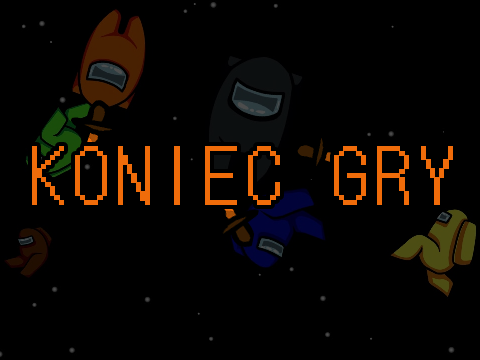
<style>
.page{position:relative;width:480px;height:360px;background:#000000}
.page>*{position:absolute;margin:0}
.t1{font:72px "DotGothic16-Regular";letter-spacing:0.1em;color:#f06c0a;text-transform:uppercase}
</style>
<div class="page">
<p class="t1" style="left:32px;top:146px;width:421px;height:59px">Koniec Gry</p>
</div>
